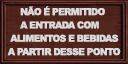
<style>
.page{position:relative;width:128px;height:64px}
.page>*{position:absolute;margin:0}
.t1{font:9.6px/13.3px "Arial-Black";letter-spacing:-0.065em;color:#dadada;scale:0.96 1}
</style>
<div class="page">
<p class="t1" style="left:7px;top:6px;width:114px;height:50px">NÃO É PERMITIDO<br>       A ENTRADA COM <br>   ALIMENTOS E BEBIDAS<br>  A PARTIR DESSE PONTO</p>
</div>
